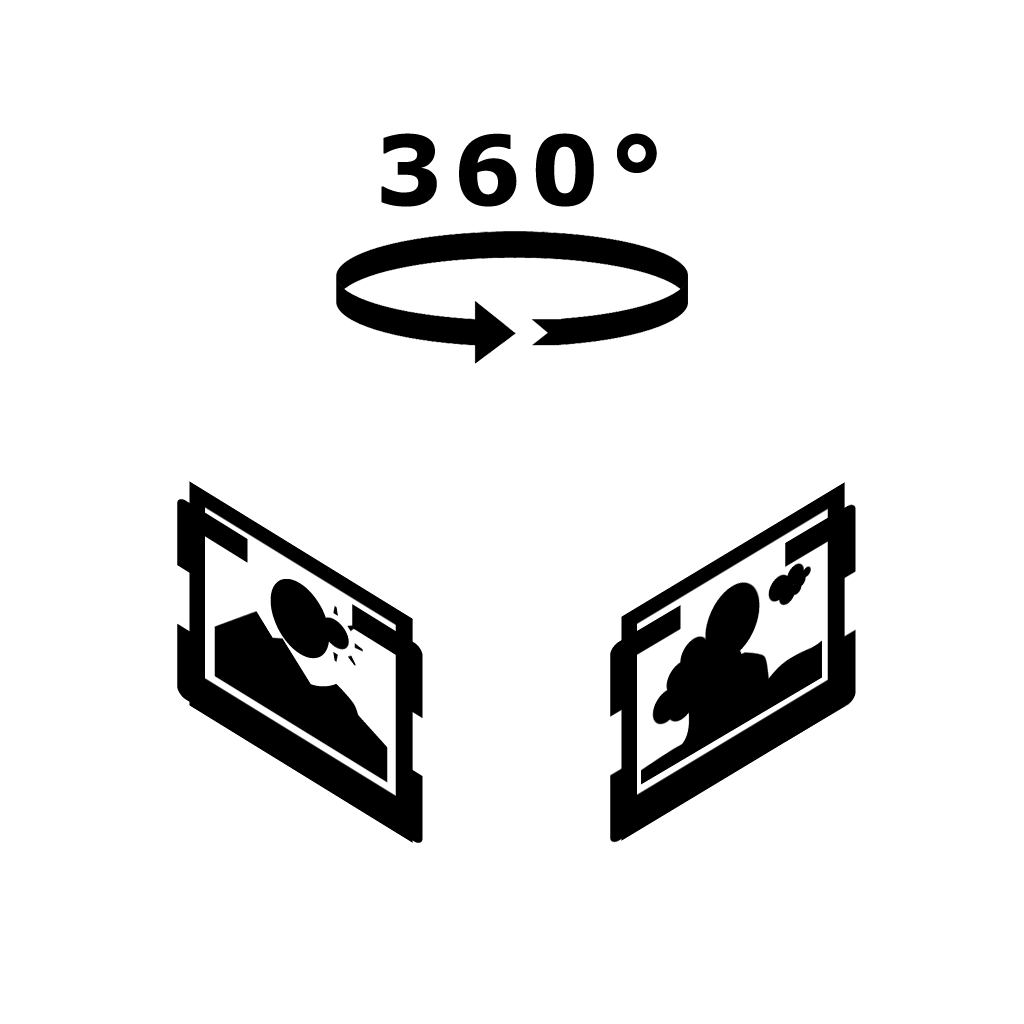
<style>
.page{position:relative;width:1024px;height:1024px;background:#ffffff}
.page>*{position:absolute;margin:0}
.t1{font:96px "Verdana-Bold";letter-spacing:0.1em;color:#000000}
</style>
<div class="page">
<p class="t1" style="left:381px;top:133px;width:276px;height:74px">360°</p>
</div>
